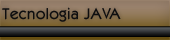
<style>
.page{position:relative;width:170px;height:40px}
.page>*{position:absolute;margin:0}
.t1{font:16px "KabobRegular";color:#0e0e0f}
</style>
<div class="page">
<p class="t1" style="left:2px;top:7px;width:119px;height:15px">Tecnologia JAVA</p>
</div>
